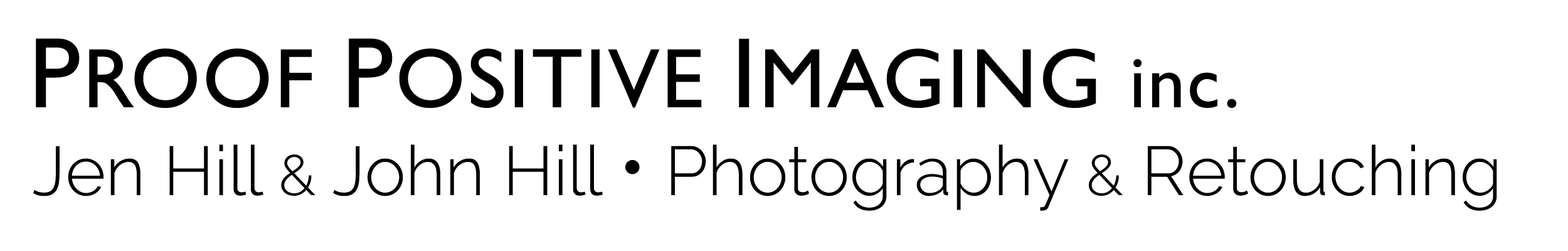
<style>
.page{position:relative;width:1568px;height:251px;background:#ffffff}
.page>*{position:absolute;margin:0}
.t1{font:84.7px "GillSans";letter-spacing:0.025em;color:#000000}
.t2{font:100.4px "GillSans";letter-spacing:0.025em;color:#000000}
.t3{font:75.3px "GillSans";letter-spacing:0.025em;color:#000000}
.t4{font:69px "Raleway-Light";color:#000000}
.t5{font:100.4px "JosefinSans-SemiBold";letter-spacing:-0.01em;color:#000000}
.t6{font:56.4px "Raleway-Light";color:#000000}
.t7{font:81.5px "Raleway-Light";color:#000000}
</style>
<div class="page">
<p class="t1" style="left:36px;top:38px;width:1201px;height:70px"><span class="t2">P</span>ROOF <span class="t2">P</span>OSITIVE <span class="t2">I</span>MAGING <span class="t3">inc.</span></p>
<p class="t4" style="left:33px;top:144px;width:1464px;height:67px"><span class="t5"> </span>Jen Hill <span class="t6">&amp;</span> John Hill <span class="t7">•</span> Photography <span class="t6">&amp;</span> Retouching</p>
</div>
